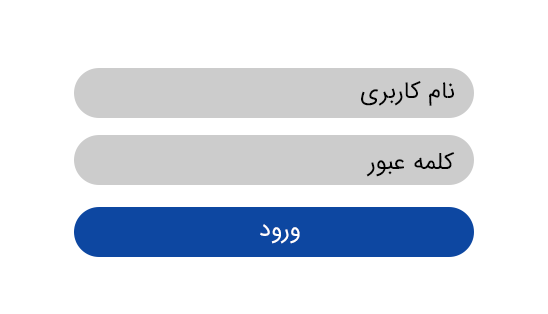
<style>
.page{position:relative;width:548px;height:314px;background:#ffffff}
.page>*{position:absolute;margin:0}
.t1{font:24px "IRANSans";color:#000000}
.t2{font:24px "IRANSans";color:#ffffff}
</style>
<div class="page">
<p class="t1" style="left:361px;top:81px;width:93px;height:25px">نام کاربری</p>
<p class="t1" style="left:366px;top:152px;width:89px;height:25px">کلمه عبور</p>
<p class="t2" style="left:260px;top:224px;width:40px;height:20px">ورود</p>
</div>
